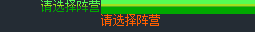
<style>
.page{position:relative;width:255px;height:32px;background:#242c34}
.page>*{position:absolute;margin:0}
.t1{font:12px "NSimSun";color:#ff5f00}
</style>
<div class="page">
<p class="t1" style="left:101px;top:14px;width:59px;height:12px">请选择阵营</p>
</div>
